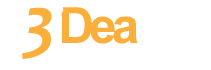
<style>
.page{position:relative;width:211px;height:70px;background:#ffffff}
.page>*{position:absolute;margin:0}
.t1{font:72px "Candara-BoldItalic";color:#fbaf3b}
.t2{font:50px "Arial-BoldMT";letter-spacing:-0.1em;color:#fbaf3b}
</style>
<div class="page">
<p class="t1" style="left:22px;top:7px;width:30px;height:52px">3</p>
<p class="t2" style="left:61px;top:7px;width:77px;height:37px">Dea</p>
</div>
